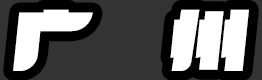
<style>
.page{position:relative;width:262px;height:80px;background:#333333}
.page>*{position:absolute;margin:0}
.t1{font:81.8px "zihunqijiyuzhouti_trial";letter-spacing:0.9em;color:#ffffff}
</style>
<div class="page">
<p class="t1" style="left:13px;top:9px;width:236px;height:62px">广州</p>
</div>
